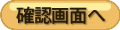
<style>
.page{position:relative;width:120px;height:30px;background:#f0be64}
.page>*{position:absolute;margin:0}
.t1{font:18px "KozGoPro-Medium";letter-spacing:-0.02em;color:#271c08}
</style>
<div class="page">
<p class="t1" style="left:16px;top:6px;width:89px;height:18px">確認画面へ</p>
</div>
